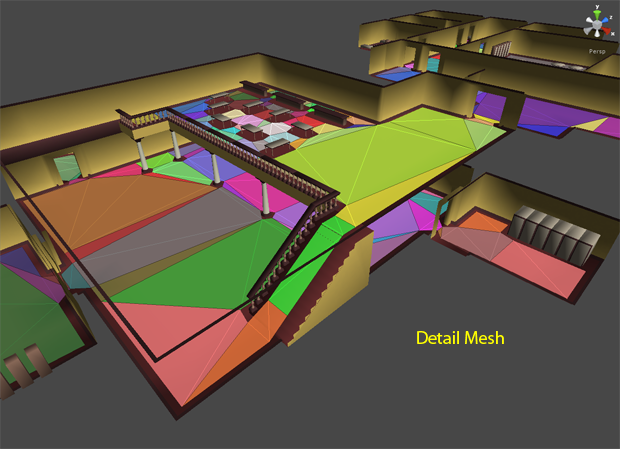
<style>
.page{position:relative;width:620px;height:449px;background:#474747}
.page>*{position:absolute;margin:0}
.t1{font:18px "MyriadPro-Regular";color:#ffff00}
</style>
<div class="page">
<p class="t1" style="left:417px;top:331px;width:87px;height:13px">Detail Mesh</p>
</div>
